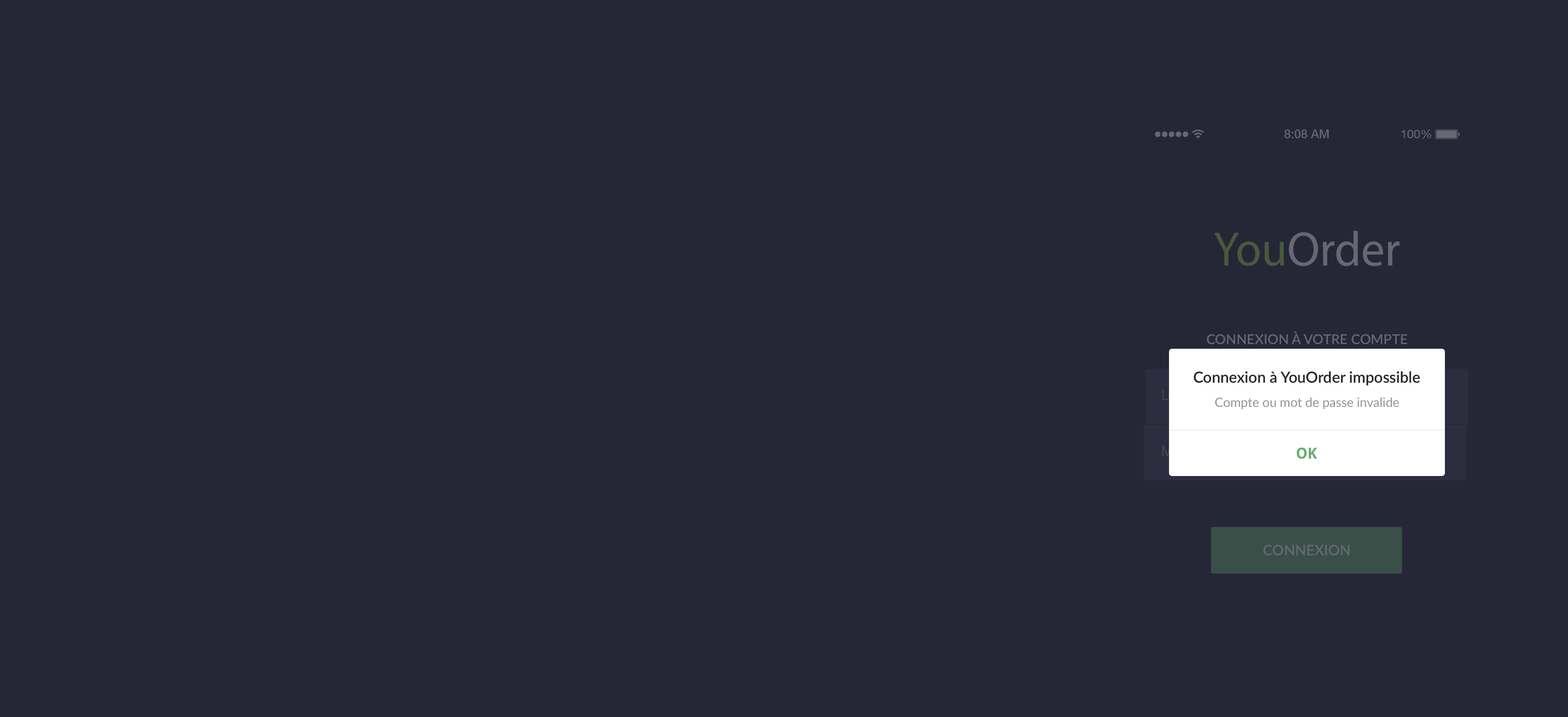
<style>
.page{position:relative;width:1568px;height:717px;background:#252736}
.page>*{position:absolute;margin:0}
.t1{font:13.6px "Lato-Semibold";color:#666772;text-transform:uppercase}
.t2{font:15.3px "Lato-Semibold";color:#26272d}
.t3{font:12.7px "Lato-Regular";color:#949499}
.t4{font:15.3px "DroidSans-Bold";color:#67ae73}
.t5{font:14.4px "Lato-Semibold";color:#666772;text-transform:uppercase}
</style>
<div class="page">
<p class="t1" style="left:1207px;top:332px;width:200px;height:13px">Connexion à votre compte</p>
<p class="t2" style="left:1194px;top:371px;width:226px;height:15px">Connexion à YouOrder impossible</p>
<p class="t3" style="left:1215px;top:398px;width:184px;height:12px">Compte ou mot de passe invalide</p>
<p class="t4" style="left:1297px;top:448px;width:20px;height:11px">OK</p>
<p class="t5" style="left:1263px;top:545px;width:87px;height:11px">connexion</p>
</div>
